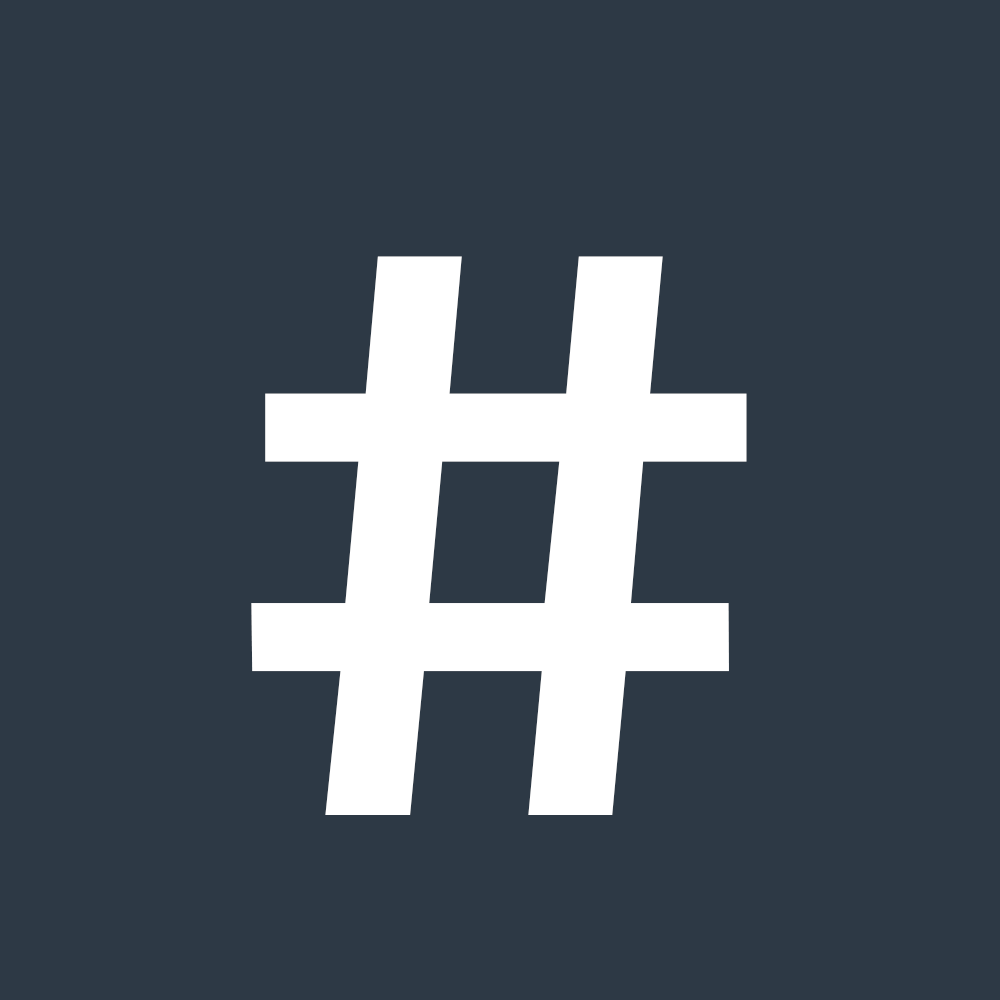
<style>
.page{position:relative;width:1000px;height:1000px;background:#2d3945}
.page>*{position:absolute;margin:0}
.t1{font:833.3px "Merriweather-Bold";color:#ffffff}
</style>
<div class="page">
<p class="t1" style="left:251px;top:256px;width:496px;height:559px">#</p>
</div>
